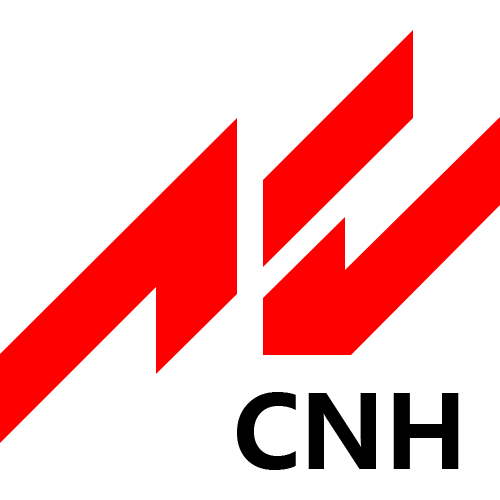
<style>
.page{position:relative;width:500px;height:500px;background:#ffffff}
.page>*{position:absolute;margin:0}
.t1{font:100px "MicrosoftYaHei-Bold";color:#000000}
</style>
<div class="page">
<p class="t1" style="left:237px;top:392px;width:222px;height:78px">CNH</p>
</div>
